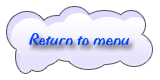
<style>
.page{position:relative;width:160px;height:80px;background:#ffffff}
.page>*{position:absolute;margin:0}
.t1{font:18px "BiffoMTStd";color:#0144ff}
</style>
<div class="page">
<p class="t1" style="left:29px;top:33px;width:101px;height:12px">Return to menu</p>
</div>
